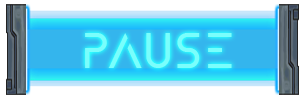
<style>
.page{position:relative;width:300px;height:100px;background:#ffffff}
.page>*{position:absolute;margin:0}
.t1{font:48px "ZELDA";color:#7afefc}
</style>
<div class="page">
<p class="t1" style="left:85px;top:33px;width:147px;height:35px">pause</p>
</div>
